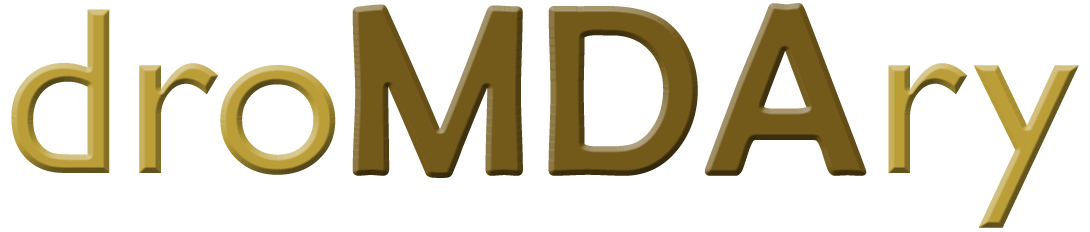
<style>
.page{position:relative;width:1090px;height:232px;background:#ffffff}
.page>*{position:absolute;margin:0}
.t1{font:239.1px "GillSansMT";color:#bb9e38}
.t2{font:239.1px "BerlinSansFB-Reg";color:#73591a;font-weight:bold}
</style>
<div class="page">
<p class="t1" style="left:11px;top:3px;width:1068px;height:225px">dro<span class="t2">MDA</span>ry</p>
</div>
